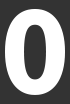
<style>
.page{position:relative;width:70px;height:104px;background:#333333}
.page>*{position:absolute;margin:0}
.t1{font:130.9px "SourceSansPro-Bold";letter-spacing:-0.05em;color:#ffffff}
</style>
<div class="page">
<p class="t1" style="left:5px;top:9px;width:60px;height:86px">0</p>
</div>
